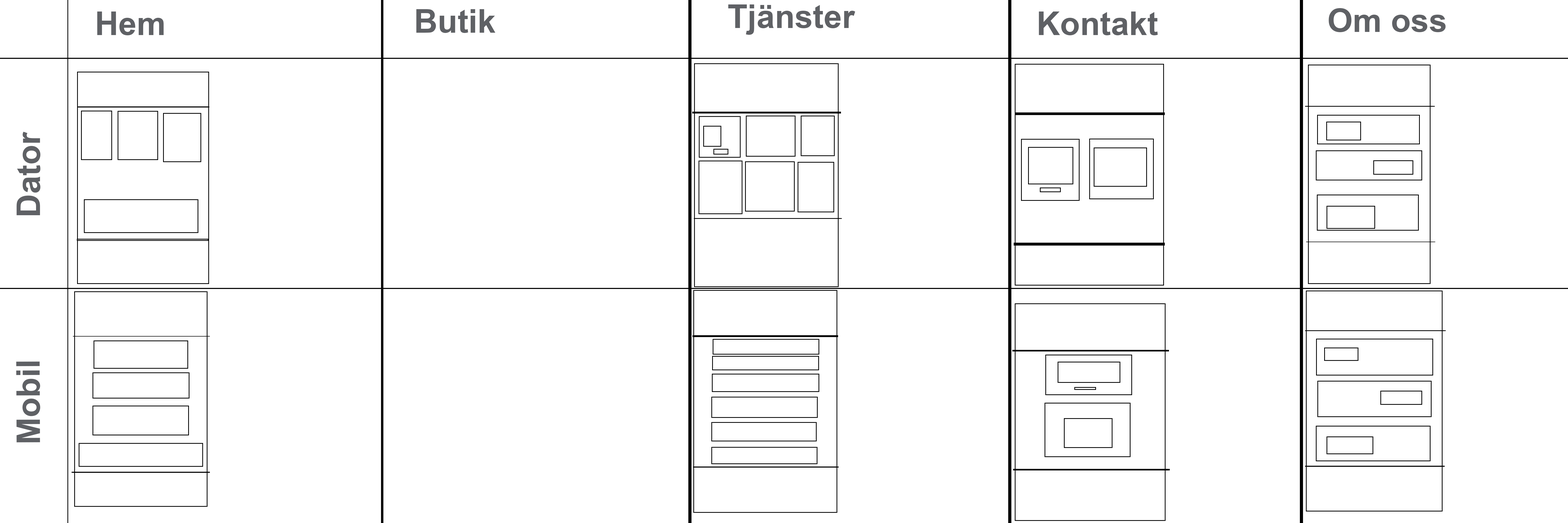
<style>
.page{position:relative;width:1568px;height:523px;background:#ffffff}
.page>*{position:absolute;margin:0}
.t1{font:32.7px "Arial-BoldMT";color:#5f6165}
</style>
<div class="page">
<p class="t1" style="left:728px;top:4px;width:127px;height:31px">Tjänster</p>
<p class="t1" style="left:97px;top:11px;width:67px;height:24px">Hem</p>
<p class="t1" style="left:416px;top:9px;width:79px;height:24px">Butik</p>
<p class="t1" style="left:1039px;top:11px;width:119px;height:24px">Kontakt</p>
<p class="t1" style="left:1329px;top:8px;width:117px;height:24px">Om oss</p>
<p class="t1" style="left:16px;top:131px;width:25px;height:84px;rotate:-90deg">Dator</p>
<p class="t1" style="left:16px;top:361px;width:24px;height:81px;rotate:-90deg">Mobil</p>
</div>
